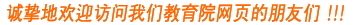
<style>
.page{position:relative;width:354px;height:25px;background:#ffffff}
.page>*{position:absolute;margin:0}
.t1{font:20px "New-Gulim";color:#ff6600;font-weight:bold;font-style:italic;scale:0.85 1}
</style>
<div class="page">
<p class="t1" style="left:7px;top:3px;width:337px;height:20px">诚挚地欢迎访问我们教育院网页的朋友们 !!!</p>
</div>
